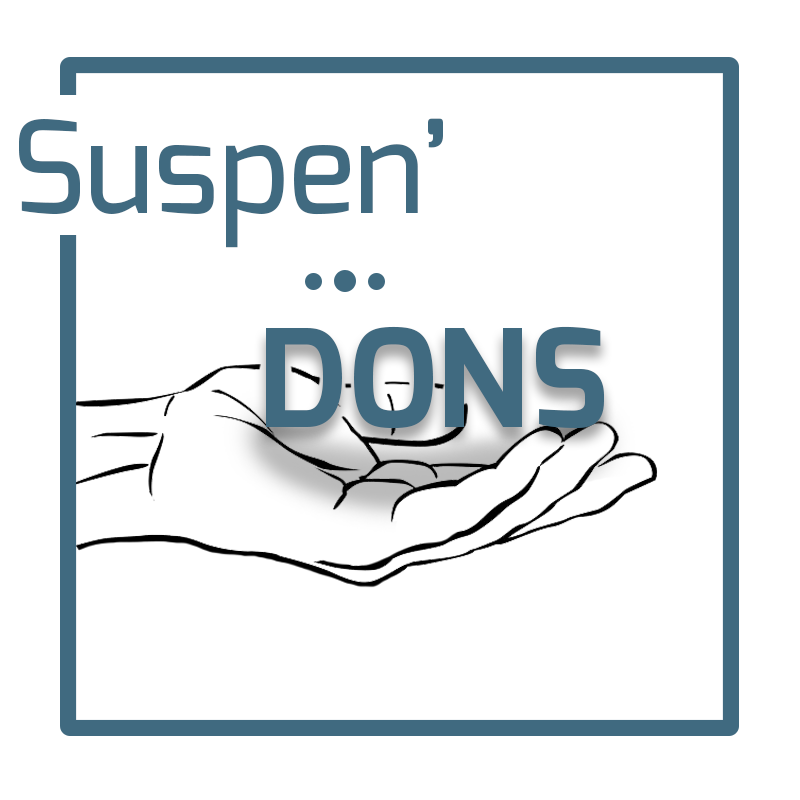
<style>
.page{position:relative;width:800px;height:800px;background:#ffffff}
.page>*{position:absolute;margin:0}
.t1{font:127px "Exo-Medium";color:#406a80}
.t2{font:134.7px "Exo-Bold";color:#406a80}
</style>
<div class="page">
<p class="t1" style="left:19px;top:118px;width:424px;height:130px">Suspen’</p>
<p class="t2" style="left:266px;top:326px;width:338px;height:103px">DONS</p>
</div>
